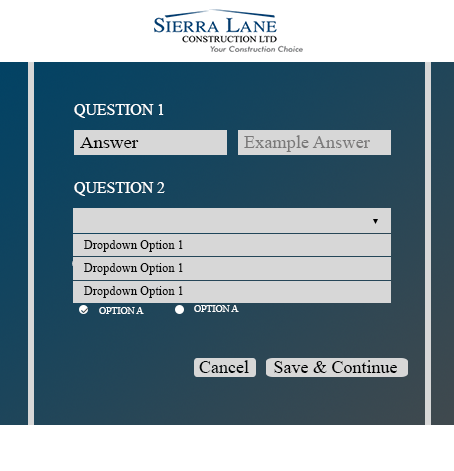
<style>
.page{position:relative;width:454px;height:471px;background:#ffffff}
.page>*{position:absolute;margin:0}
.t1{font:15.8px "TimesNewRomanPSMT";color:#feffff}
.t2{font:16.7px "TimesNewRomanPSMT";color:#000000;scale:1.11 1}
.t3{font:17.6px "TimesNewRomanPSMT";color:#7a7979;scale:1.04 1}
.t4{font:12.3px "TimesNewRomanPSMT";color:#070707}
.t5{font:10px "TimesNewRomanPSMT";color:#feffff;scale:0.97 1}
.t6{font:18px "TimesNewRomanPSMT";color:#000507}
.t7{font:18px "TimesNewRomanPSMT";color:#000102}
</style>
<div class="page">
<p class="t1" style="left:74px;top:104px;width:90px;height:14px">QUESTION 1</p>
<p class="t2" style="left:80px;top:137px;width:59px;height:11px">Answer</p>
<p class="t3" style="left:244px;top:135px;width:126px;height:17px">Example Answer</p>
<p class="t1" style="left:74px;top:182px;width:91px;height:14px">QUESTION 2</p>
<p class="t4" style="left:84px;top:240px;width:99px;height:12px">Dropdown Option 1</p>
<p class="t4" style="left:84px;top:263px;width:99px;height:12px">Dropdown Option 1</p>
<p class="t4" style="left:84px;top:286px;width:99px;height:12px">Dropdown Option 1</p>
<p class="t5" style="left:194px;top:305px;width:45px;height:7px">OPTION A</p>
<p class="t5" style="left:99px;top:307px;width:45px;height:7px">OPTION A</p>
<p class="t6" style="left:199px;top:360px;width:50px;height:13px">Cancel</p>
<p class="t7" style="left:274px;top:360px;width:123px;height:13px">Save &amp; Continue</p>
</div>
